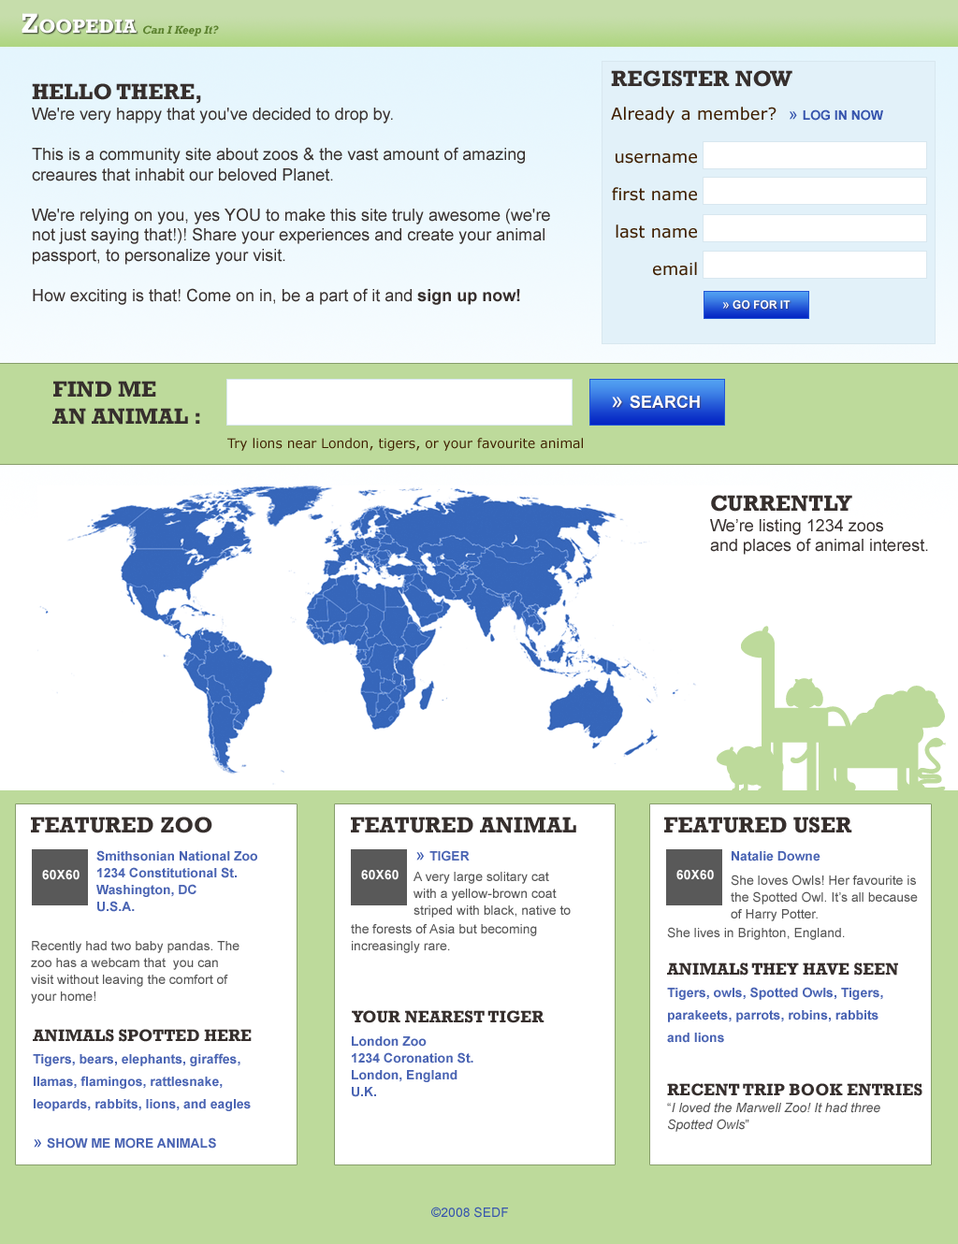
<style>
.page{position:relative;width:958px;height:1244px;background:#ffffff}
.page>*{position:absolute;margin:0}
.t1{font:28.1px "Rockwell-Bold";color:#ffffff;font-variant:small-caps}
.t2{font:11.2px "Rockwell-BoldItalic";color:#5c822f}
.t3{font:16.8px/33.7px "Verdana";color:#3f1f00}
.t4{font:22.5px "Rockwell-Bold";color:#362f2d;text-transform:uppercase}
.t5{font:16.8px/16.8px "ArialMT";color:#3654ad}
.t6{font:13.1px/22.5px "Arial-BoldMT";color:#3654ad;text-transform:uppercase}
.t7{font:16.8px "ArialMT";color:#362f2d}
.t8{font:16.8px "Arial-BoldMT";color:#362f2d}
.t9{font:16.8px/37.4px "Verdana";color:#3f1f00}
.t10{font:11.2px "Arial-BoldMT";color:#ffffff;font-variant:small-caps}
.t11{font:13.1px "ArialMT";color:#ffffff}
.t12{font:16.8px "Arial-BoldMT";color:#ffffff;font-variant:small-caps}
.t13{font:22.5px "ArialMT";color:#ffffff}
.t14{font:13.1px "Verdana";color:#3f1f00}
.t15{font:13.1px/16.8px "Arial-BoldMT";color:#4a64b3}
.t16{font:13.1px "Arial-BoldMT";color:#4a64b3}
.t17{font:16.8px "ArialMT";color:#3654ad}
.t18{font:13.1px "Arial-BoldMT";color:#ffffff;text-transform:uppercase}
.t19{font:13.1px/16.8px "ArialMT";color:#555555}
.t20{font:13.1px/22.5px "Arial-BoldMT";color:#4a64b3}
.t21{font:16.8px "Rockwell-Bold";color:#362f2d;text-transform:uppercase}
.t22{font:13.1px/16.8px "Arial-ItalicMT";color:#555555}
.t23{font:13.1px "ArialMT";color:#3654ad}
</style>
<div class="page">
<p class="t1" style="left:22px;top:13px;width:115px;height:21px">Zoopedia</p>
<p class="t2" style="left:143px;top:25px;width:76px;height:11px">Can I Keep It?</p>
<p class="t3" style="left:611px;top:70px;width:272px;height:54px"><span class="t4">register now<br></span>Already a member?  <span class="t5">» </span><span class="t6">LOG IN now</span></p>
<p class="t7" style="left:32px;top:83px;width:518px;height:222px"><span class="t4">Hello there, <br></span>We're very happy that you've decided to drop by.<br><br>This is a community site about zoos &amp; the vast amount of amazing creaures that inhabit our beloved Planet. <br><br>We're relying on you, yes YOU to make this site truly awesome (we're not just saying that!)! Share your experiences and create your animal passport, to personalize your visit.<br><br>How exciting is that! Come on in, be a part of it and <span class="t8">sign up now!</span></p>
<p class="t9" style="left:612px;top:153px;width:85px;height:123px;text-align:right">username<br>first name<br>last name<br>email</p>
<p class="t10" style="left:722px;top:300px;width:69px;height:10px"><span class="t11">»</span> GO FOR IT</p>
<p class="t4" style="left:52px;top:381px;width:148px;height:44px">Find me<br>an animal :</p>
<p class="t12" style="left:612px;top:395px;width:88px;height:14px"><span class="t13">» </span>SEARCH</p>
<p class="t14" style="left:227px;top:438px;width:356px;height:13px">Try lions near London, tigers, or your favourite animal</p>
<p class="t7" style="left:710px;top:495px;width:218px;height:60px"><span class="t4">Currently <br></span>We’re listing 1234 zoos<br>and places of animal interest.</p>
<p class="t4" style="left:31px;top:817px;width:181px;height:17px">Featured Zoo</p>
<p class="t4" style="left:351px;top:817px;width:225px;height:17px">Featured Animal</p>
<p class="t4" style="left:664px;top:817px;width:188px;height:17px">Featured User</p>
<p class="t15" style="left:96px;top:851px;width:161px;height:61px">Smithsonian National Zoo<br>1234 Constitutional St.<br>Washington, DC<br>U.S.A.</p>
<p class="t16" style="left:416px;top:851px;width:54px;height:11px"><span class="t17">» </span>TIGER</p>
<p class="t16" style="left:732px;top:851px;width:89px;height:11px">Natalie Downe</p>
<p class="t18" style="left:42px;top:870px;width:38px;height:11px">60x60</p>
<p class="t18" style="left:361px;top:870px;width:38px;height:11px">60x60</p>
<p class="t19" style="left:414px;top:872px;width:157px;height:46px">A very large solitary cat with a yellow-brown coat striped with black, native to</p>
<p class="t18" style="left:677px;top:870px;width:37px;height:11px">60x60</p>
<p class="t19" style="left:731px;top:875px;width:187px;height:47px">She loves Owls! Her favourite is<br>the Spotted Owl. It’s all because<br>of Harry Potter.</p>
<p class="t19" style="left:351px;top:924px;width:186px;height:29px">the forests of Asia but becoming increasingly rare.</p>
<p class="t20" style="left:667px;top:927px;width:256px;height:205px"><span class="t19">She lives in Brighton, England.<br><br></span><span class="t21">animals they have seen<br></span>Tigers, owls, Spotted Owls, Tigers,<br>parakeets, parrots, robins, rabbits<br>and lions<br><br><br><span class="t21">recent trip book entries<br></span><span class="t19">“</span><span class="t22">I loved the Marwell Zoo! It had three <br>Spotted Owls</span><span class="t19">”</span></p>
<p class="t19" style="left:31px;top:941px;width:209px;height:63px">Recently had two baby pandas. The<br>zoo has a webcam that  you can<br>visit without leaving the comfort of<br>your home!</p>
<p class="t21" style="left:352px;top:1011px;width:193px;height:13px">your nearest tiger</p>
<p class="t20" style="left:33px;top:1029px;width:219px;height:120px"><span class="t21">animals spotted here<br></span>Tigers, bears, elephants, giraffes,<br>llamas, flamingos, rattlesnake,<br>leopards, rabbits, lions, and eagles<br><br><span class="t5">» </span><span class="t15">SHOW ME MORE ANIMALS</span></p>
<p class="t15" style="left:352px;top:1037px;width:121px;height:61px">London Zoo<br>1234 Coronation St.<br>London, England<br>U.K.</p>
<p class="t23" style="left:431px;top:1207px;width:77px;height:11px">©2008 SEDF</p>
</div>
